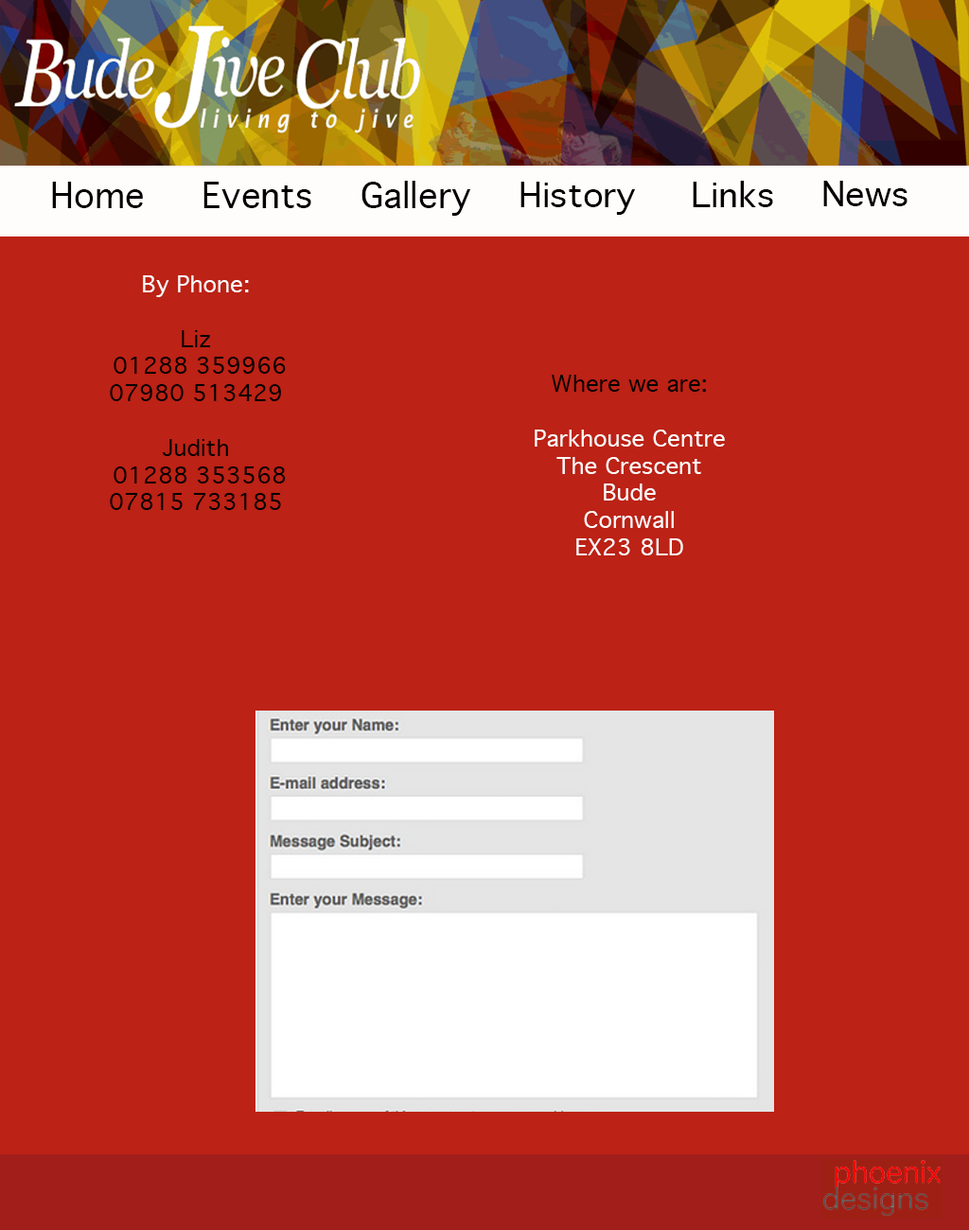
<style>
.page{position:relative;width:969px;height:1230px;background:#bc2215}
.page>*{position:absolute;margin:0}
.t1{font:33.9px "Geneva";color:#020000}
.t2{font:32.8px "Geneva";color:#020000;scale:1.04 1}
.t3{font:22.7px "Geneva";color:#010000}
.t4{font:22.7px "Geneva";color:#fdfbfb}
</style>
<div class="page">
<p class="t1" style="left:52px;top:182px;width:91px;height:26px">Home</p>
<p class="t1" style="left:203px;top:182px;width:108px;height:26px">Events</p>
<p class="t1" style="left:362px;top:181px;width:108px;height:35px">Gallery</p>
<p class="t2" style="left:521px;top:182px;width:114px;height:33px">History</p>
<p class="t2" style="left:693px;top:181px;width:80px;height:26px">Links</p>
<p class="t2" style="left:823px;top:181px;width:85px;height:25px">News</p>
<p class="t3" style="left:110px;top:275px;width:176px;height:235px;text-align:center"><span class="t4">By Phone:<br></span><br>Liz<br> 01288 359966 <br>07980 513429<br><br>Judith<br> 01288 353568 <br>07815 733185</p>
<p class="t4" style="left:535px;top:375px;width:190px;height:181px;text-align:center"><span class="t3">Where we are:<br></span><br>Parkhouse Centre<br>The Crescent<br>Bude<br>Cornwall <br>EX23 8LD</p>
</div>
